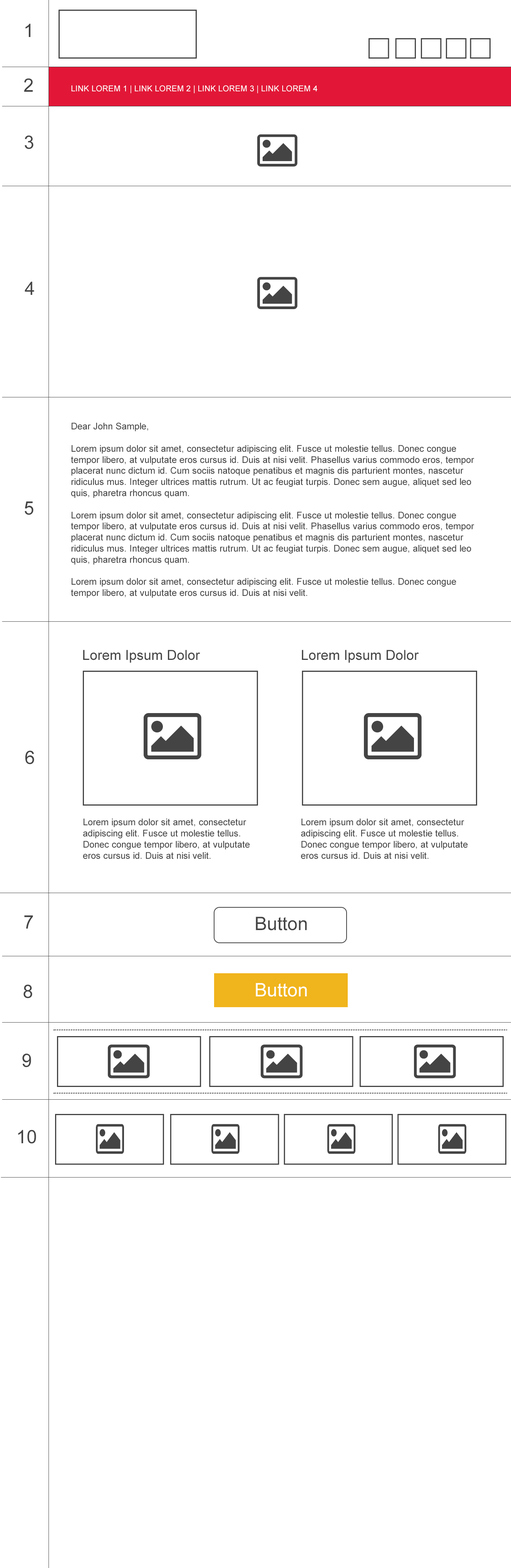
<style>
.page{position:relative;width:511px;height:1568px;background:#ffffff}
.page>*{position:absolute;margin:0}
.t1{font:18.5px "ArialMT";color:#444444}
.t2{font:8.2px "ArialMT";color:#ffffff}
.t3{font:9.3px "ArialMT";color:#444444}
.t4{font:13.9px "ArialMT";color:#444444}
.t5{font:18.5px "ArialMT";color:#ffffff}
</style>
<div class="page">
<p class="t1" style="left:25px;top:24px;width:5px;height:13px">1</p>
<p class="t1" style="left:24px;top:78px;width:9px;height:14px">2</p>
<p class="t2" style="left:71px;top:85px;width:247px;height:8px">LINK LOREM 1 | LINK LOREM 2 | LINK LOREM 3 | LINK LOREM 4</p>
<p class="t1" style="left:25px;top:135px;width:9px;height:14px">3</p>
<p class="t1" style="left:25px;top:281px;width:9px;height:14px">4</p>
<p class="t3" style="left:71px;top:422px;width:404px;height:176px">Dear John Sample,<br><br>Lorem ipsum dolor sit amet, consectetur adipiscing elit. Fusce ut molestie tellus. Donec congue tempor libero, at vulputate eros cursus id. Duis at nisi velit. Phasellus varius commodo eros, tempor placerat nunc dictum id. Cum sociis natoque penatibus et magnis dis parturient montes, nascetur ridiculus mus. Integer ultrices mattis rutrum. Ut ac feugiat turpis. Donec sem augue, aliquet sed leo quis, pharetra rhoncus quam.<br><br>Lorem ipsum dolor sit amet, consectetur adipiscing elit. Fusce ut molestie tellus. Donec congue tempor libero, at vulputate eros cursus id. Duis at nisi velit. Phasellus varius commodo eros, tempor placerat nunc dictum id. Cum sociis natoque penatibus et magnis dis parturient montes, nascetur ridiculus mus. Integer ultrices mattis rutrum. Ut ac feugiat turpis. Donec sem augue, aliquet sed leo quis, pharetra rhoncus quam.<br><br>Lorem ipsum dolor sit amet, consectetur adipiscing elit. Fusce ut molestie tellus. Donec congue tempor libero, at vulputate eros cursus id. Duis at nisi velit.</p>
<p class="t1" style="left:25px;top:501px;width:9px;height:14px">5</p>
<p class="t4" style="left:83px;top:650px;width:117px;height:13px">Lorem Ipsum Dolor</p>
<p class="t4" style="left:302px;top:650px;width:117px;height:13px">Lorem Ipsum Dolor</p>
<p class="t1" style="left:25px;top:750px;width:9px;height:14px">6</p>
<p class="t3" style="left:83px;top:818px;width:167px;height:41px">Lorem ipsum dolor sit amet, consectetur adipiscing elit. Fusce ut molestie tellus. Donec congue tempor libero, at vulputate eros cursus id. Duis at nisi velit.</p>
<p class="t3" style="left:301px;top:818px;width:167px;height:41px">Lorem ipsum dolor sit amet, consectetur adipiscing elit. Fusce ut molestie tellus. Donec congue tempor libero, at vulputate eros cursus id. Duis at nisi velit.</p>
<p class="t1" style="left:24px;top:915px;width:9px;height:14px">7</p>
<p class="t1" style="left:256px;top:917px;width:51px;height:13px">Button</p>
<p class="t1" style="left:24px;top:984px;width:8px;height:14px">87</p>
<p class="t5" style="left:256px;top:983px;width:51px;height:14px">Button</p>
<p class="t1" style="left:22px;top:1053px;width:9px;height:14px">97</p>
<p class="t1" style="left:18px;top:1130px;width:18px;height:14px;text-align:center">10<br>7</p>
</div>
